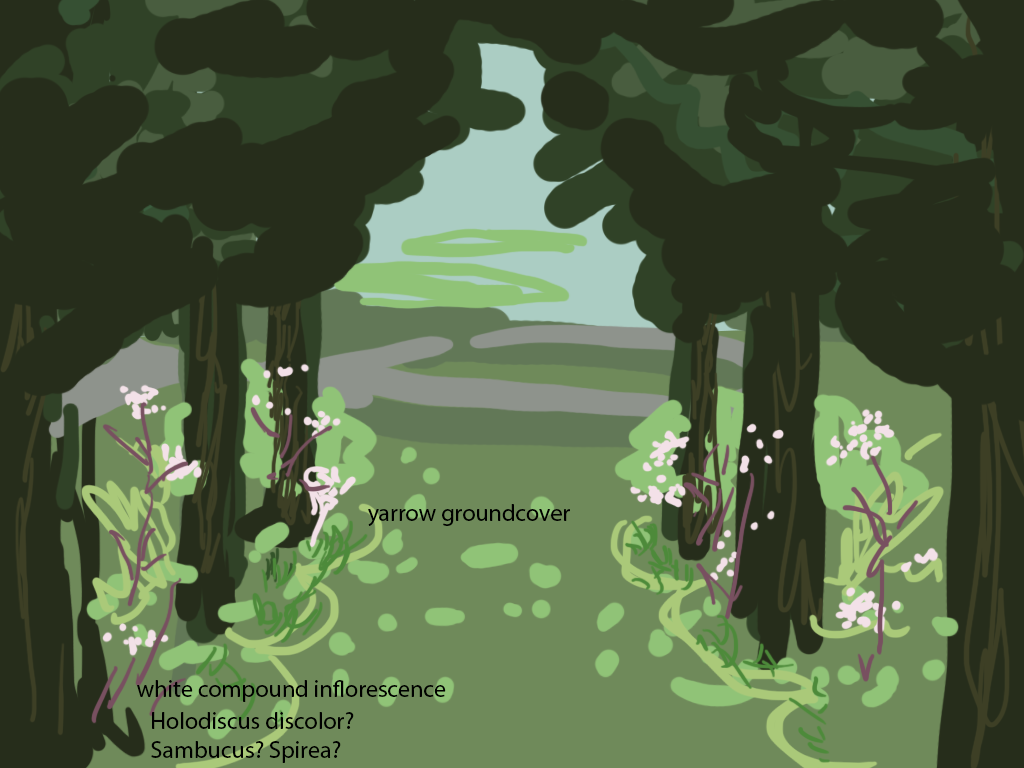
<style>
.page{position:relative;width:1024px;height:768px;background:#262d1b}
.page>*{position:absolute;margin:0}
.t1{font:24px "MyriadPro-Regular";color:#000000}
</style>
<div class="page">
<p class="t1" style="left:368px;top:504px;width:202px;height:22px">yarrow groundcover</p>
<p class="t1" style="left:137px;top:680px;width:309px;height:22px">white compound inflorescence</p>
<p class="t1" style="left:151px;top:712px;width:203px;height:51px">Holodiscus discolor?<br>Sambucus? Spirea?</p>
</div>
